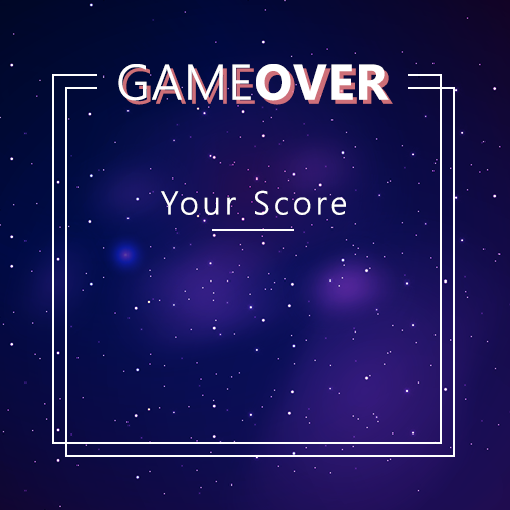
<style>
.page{position:relative;width:510px;height:510px}
.page>*{position:absolute;margin:0}
.t1{font:50px "SegoeUI-Semilight";letter-spacing:0.02em;color:#ffffff}
.t2{font:50px "SegoeUI-Bold";letter-spacing:0.02em;color:#ffffff}
.t3{font:50px "SegoeUI-Semilight";letter-spacing:0.02em}
.t4{font:50px "SegoeUI-Bold";letter-spacing:0.02em}
.t5{font:33px "SegoeUI-Semilight";letter-spacing:0.12em;color:#ffffff}
</style>
<div class="page">
<p class="t1" style="left:118px;top:64px;width:271px;height:37px">GAME<span class="t2">OVER</span></p>
<p class="t3" style="left:122px;top:68px;width:271px;height:37px">GAME<span class="t4">OVER</span></p>
<p class="t5" style="left:161px;top:190px;width:185px;height:25px">Your Score</p>
</div>
